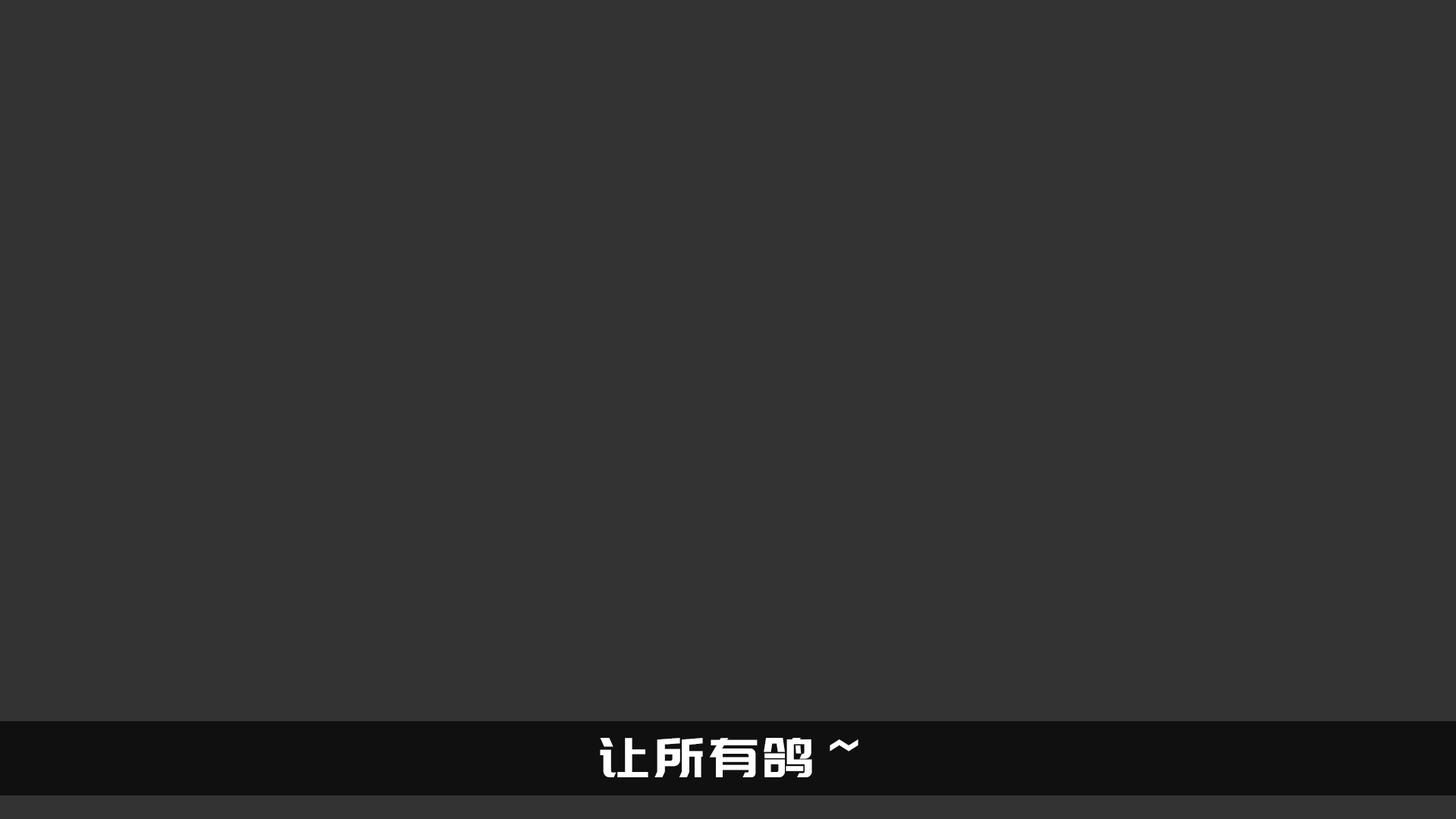
<style>
.page{position:relative;width:1456px;height:819px;background:#333333}
.page>*{position:absolute;margin:0}
.t1{font:54.6px "PangMenZhengDao-3";color:#ffffff}
</style>
<div class="page">
<p class="t1" style="left:600px;top:738px;width:258px;height:39px">让所有鸽~</p>
</div>
